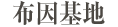
<style>
.page{position:relative;width:118px;height:27px;background:#ffffff}
.page>*{position:absolute;margin:0}
.t1{font:26px "RyuminPro-ExBold";color:#4c4843;scale:0.9 1}
</style>
<div class="page">
<p class="t1" style="left:13px;top:0px;width:92px;height:25px">布因基地</p>
</div>
